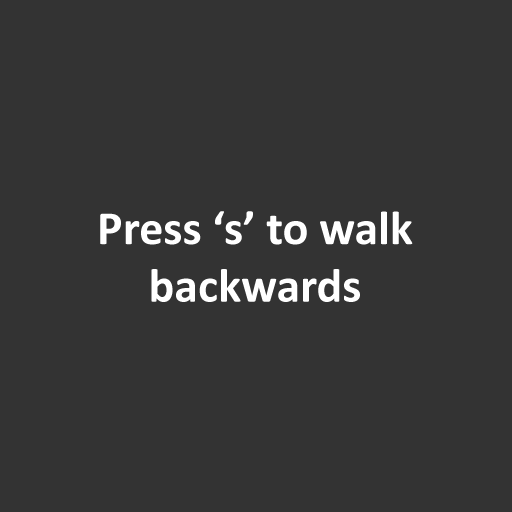
<style>
.page{position:relative;width:512px;height:512px;background:#333333}
.page>*{position:absolute;margin:0}
.t1{font:48px "Calibri-Bold";color:#ffffff}
</style>
<div class="page">
<p class="t1" style="left:100px;top:211px;width:313px;height:91px;text-align:center">Press ‘s’ to walk<br>backwards</p>
</div>
